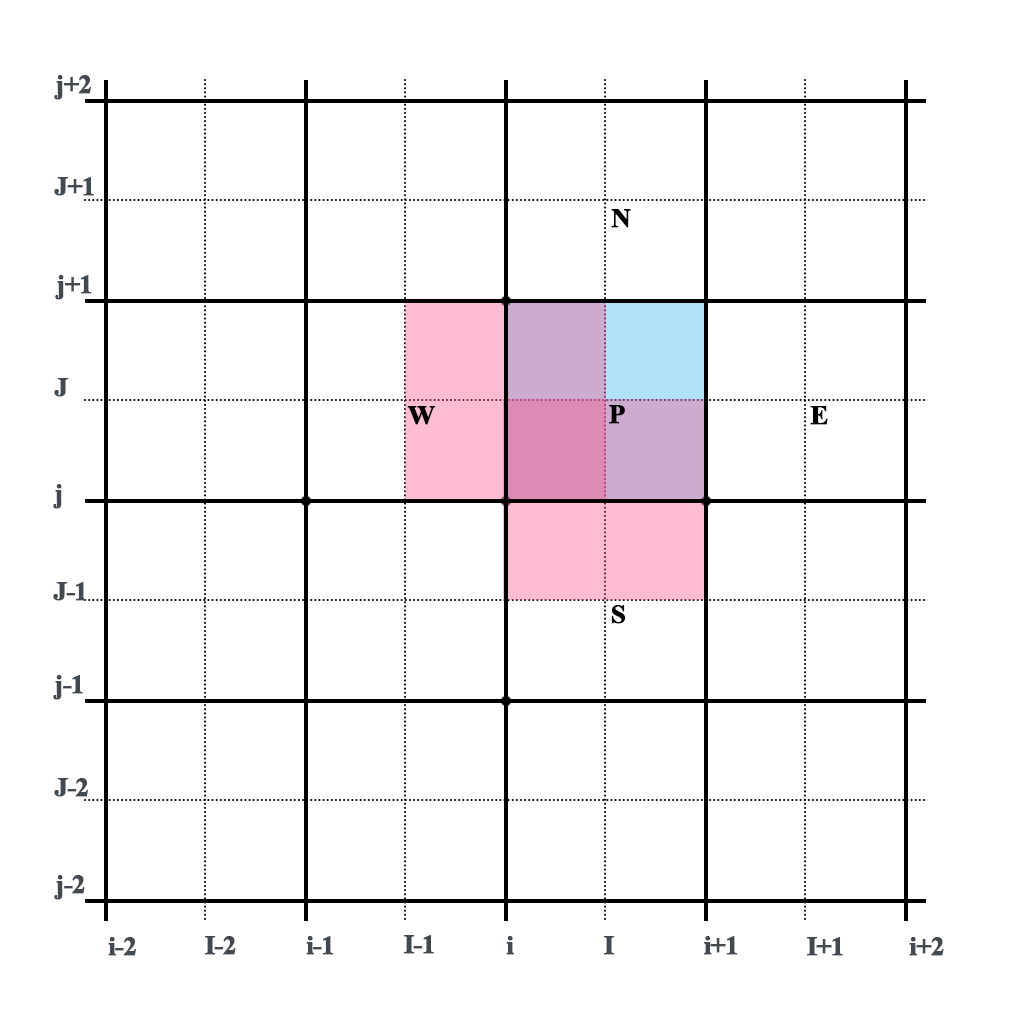
<style>
.page{position:relative;width:1024px;height:1024px;background:#ffffff}
.page>*{position:absolute;margin:0}
.t1{font:27px "TimesNewRomanPS-BoldMT";letter-spacing:-0.055em;color:#424951;font-weight:bold}
.t2{font:27px "TimesNewRomanPS-BoldMT";letter-spacing:-0.055em;color:#000000;font-weight:bold}
</style>
<div class="page">
<p class="t1" style="left:54px;top:75px;width:37px;height:25px">j+2</p>
<p class="t1" style="left:54px;top:177px;width:40px;height:19px">J+1</p>
<p class="t2" style="left:611px;top:209px;width:20px;height:19px">N</p>
<p class="t1" style="left:55px;top:275px;width:37px;height:25px">j+1</p>
<p class="t1" style="left:54px;top:378px;width:15px;height:19px">J</p>
<p class="t2" style="left:407px;top:406px;width:28px;height:19px">W</p>
<p class="t2" style="left:609px;top:405px;width:16px;height:19px">P</p>
<p class="t2" style="left:810px;top:406px;width:18px;height:19px">E</p>
<p class="t1" style="left:53px;top:484px;width:9px;height:25px">j</p>
<p class="t1" style="left:53px;top:582px;width:34px;height:19px">J-1</p>
<p class="t2" style="left:611px;top:605px;width:15px;height:19px">S</p>
<p class="t1" style="left:53px;top:675px;width:30px;height:25px">j-1</p>
<p class="t1" style="left:54px;top:778px;width:34px;height:19px">J-2</p>
<p class="t1" style="left:54px;top:875px;width:31px;height:25px">j-2</p>
<p class="t1" style="left:108px;top:937px;width:28px;height:19px">i-2</p>
<p class="t1" style="left:205px;top:936px;width:31px;height:19px">I-2</p>
<p class="t1" style="left:306px;top:936px;width:28px;height:19px">i-1</p>
<p class="t1" style="left:404px;top:935px;width:30px;height:19px">I-1</p>
<p class="t1" style="left:506px;top:936px;width:8px;height:19px">i</p>
<p class="t1" style="left:604px;top:936px;width:11px;height:19px">I</p>
<p class="t1" style="left:704px;top:936px;width:34px;height:19px">i+1</p>
<p class="t1" style="left:807px;top:937px;width:36px;height:19px">I+1</p>
<p class="t1" style="left:909px;top:937px;width:35px;height:19px">i+2</p>
</div>
